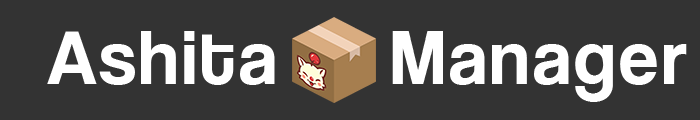
<style>
.page{position:relative;width:700px;height:120px;background:#333333}
.page>*{position:absolute;margin:0}
.t1{font:78px "CoolveticaRg-Regular";letter-spacing:0.045em;color:#ffffff}
</style>
<div class="page">
<p class="t1" style="left:47px;top:31px;width:228px;height:54px">Ashita</p>
<p class="t1" style="left:392px;top:31px;width:295px;height:71px">Manager</p>
</div>
